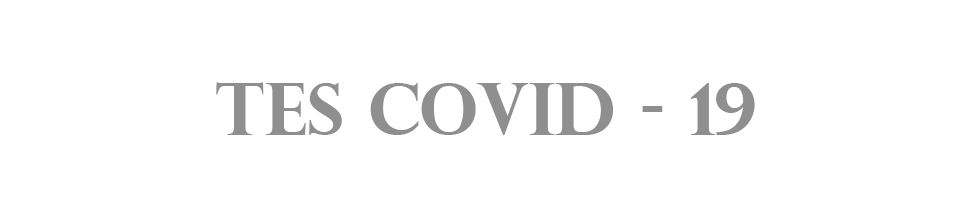
<style>
.page{position:relative;width:960px;height:200px;background:#ffffff}
.page>*{position:absolute;margin:0}
.t1{font:72px "PerpetuaTitlingMT-Bold";color:#8f8f8f}
</style>
<div class="page">
<p class="t1" style="left:216px;top:82px;width:539px;height:53px">Tes Covid - 19</p>
</div>
